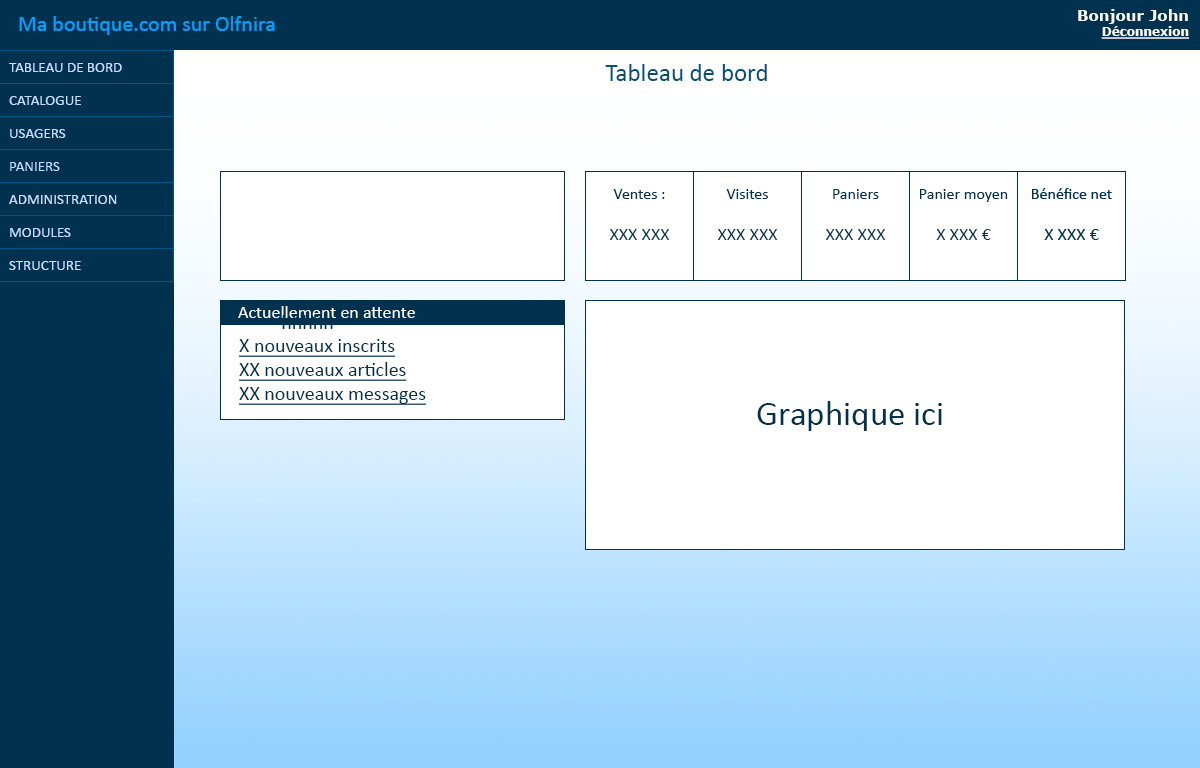
<style>
.page{position:relative;width:1200px;height:768px;background:#ffffff}
.page>*{position:absolute;margin:0}
.t1{font:22px "Calibri";color:#01a0ff}
.t2{font:15px "Verdana-Bold";color:#fefefe}
.t3{font:12px "Verdana-Bold";color:#fefefe;text-decoration:underline}
.t4{font:15px "Calibri";color:#c8dcff}
.t5{font:25px "Calibri";color:#005078}
.t6{font:16px "Calibri";color:#003250}
.t7{font:18px "Calibri";color:#003250}
.t8{font:18px "Calibri";color:#ffffff}
.t9{font:20px "Calibri";color:#003250;text-decoration:underline}
.t10{font:35px "Calibri";color:#003250}
</style>
<div class="page">
<p class="t1" style="left:19px;top:16px;width:256px;height:19px">Ma boutique.com sur Olfnira</p>
<p class="t2" style="left:1078px;top:9px;width:111px;height:30px;text-align:right">Bonjour John<br><span class="t3">Déconnexion</span></p>
<p class="t4" style="left:9px;top:63px;width:113px;height:9px">TABLEAU DE BORD</p>
<p class="t5" style="left:605px;top:64px;width:162px;height:17px">Tableau de bord</p>
<p class="t4" style="left:9px;top:96px;width:72px;height:9px">CATALOGUE</p>
<p class="t4" style="left:10px;top:129px;width:56px;height:9px">USAGERS</p>
<p class="t4" style="left:9px;top:195px;width:108px;height:9px">ADMINISTRATION</p>
<p class="t6" style="left:610px;top:189px;width:60px;height:51px;text-align:center">Ventes :<br><br><span class="t7">XXX XXX</span></p>
<p class="t6" style="left:718px;top:189px;width:60px;height:51px;text-align:center">Visites<br><br><span class="t7">XXX XXX</span></p>
<p class="t6" style="left:826px;top:189px;width:60px;height:51px;text-align:center">Paniers<br><br><span class="t7">XXX XXX</span></p>
<p class="t6" style="left:920px;top:189px;width:88px;height:51px;text-align:center">Panier moyen<br><br><span class="t7">X XXX €</span></p>
<p class="t4" style="left:10px;top:228px;width:61px;height:9px">MODULES</p>
<p class="t4" style="left:9px;top:261px;width:72px;height:9px">STRUCTURE</p>
<p class="t8" style="left:238px;top:306px;width:177px;height:12px">Actuellement en attente</p>
<p class="t9" style="left:239px;top:339px;width:188px;height:66px">X nouveaux inscrits<br>XX nouveaux articles<br>XX nouveaux messages</p>
<p class="t10" style="left:757px;top:401px;width:185px;height:30px">Graphique ici</p>
</div>
